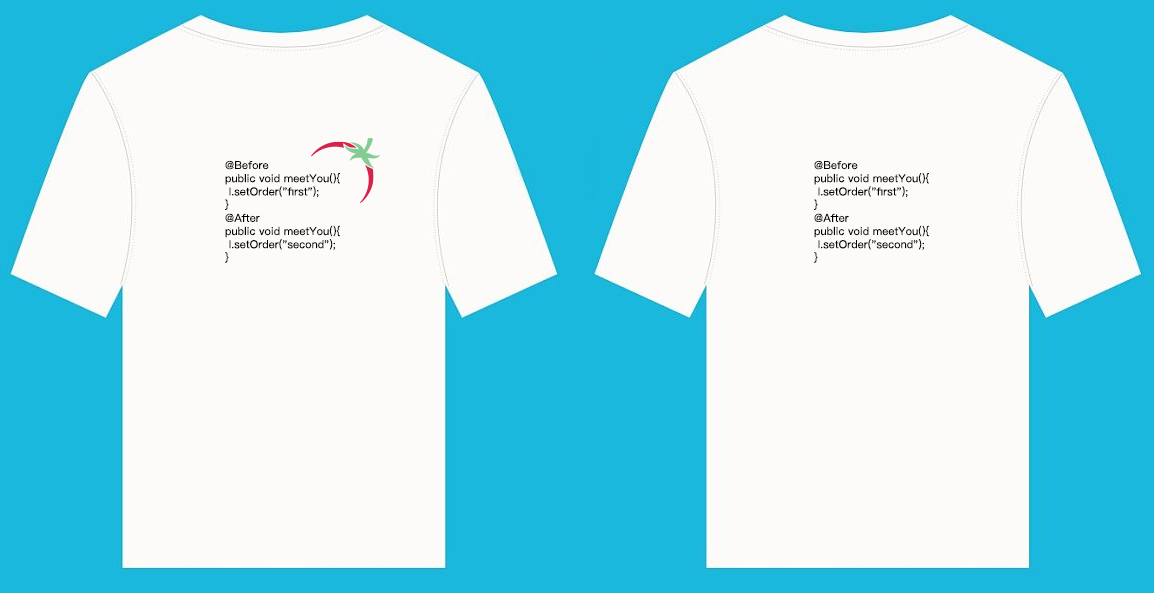
<style>
.page{position:relative;width:1154px;height:593px;background:#fcfbf9}
.page>*{position:absolute;margin:0}
.t1{font:11px "PingFangSC-Medium";color:#000000}
</style>
<div class="page">
<p class="t1" style="left:225px;top:160px;width:115px;height:103px">@Before<br>public void meetYou(){<br> I.setOrder("first");<br>}<br>@After<br>public void meetYou(){<br> I.setOrder("second");<br>}</p>
<p class="t1" style="left:814px;top:160px;width:115px;height:103px">@Before<br>public void meetYou(){<br> I.setOrder("first");<br>}<br>@After<br>public void meetYou(){<br> I.setOrder("second");<br>}</p>
</div>
